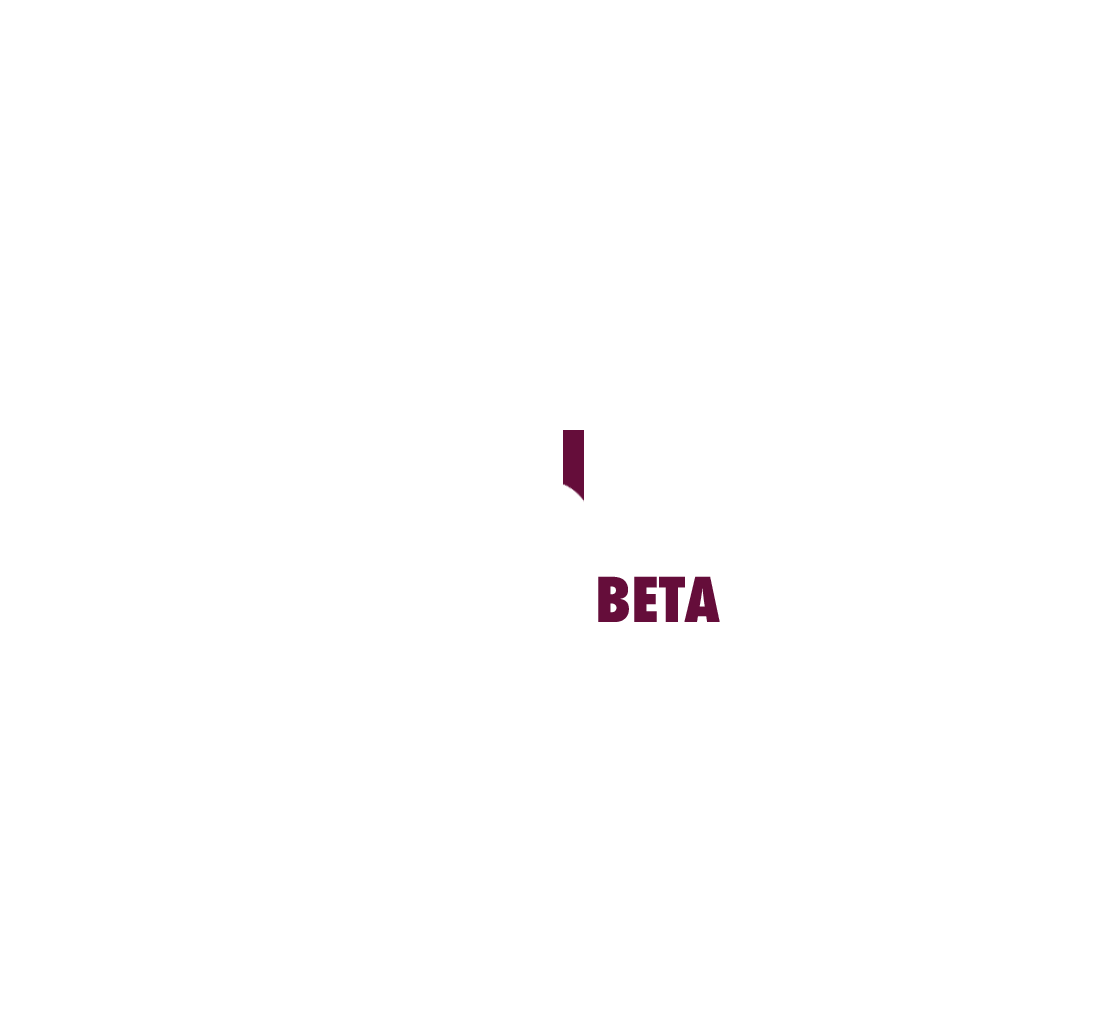
<style>
.page{position:relative;width:1093px;height:1024px;background:#ffffff}
.page>*{position:absolute;margin:0}
.t1{font:60px "Futura-CondensedExtraBold";color:#650d3a}
</style>
<div class="page">
<p class="t1" style="left:598px;top:576px;width:122px;height:46px">BETA</p>
</div>
